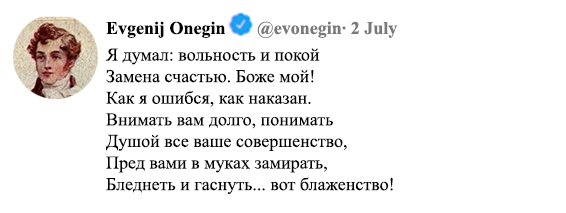
<style>
.page{position:relative;width:566px;height:213px;background:#ffffff}
.page>*{position:absolute;margin:0}
.t1{font:18px "TimesNewRomanPS-BoldMT";color:#7a7a7a}
.t2{font:18px "TimesNewRomanPS-BoldMT";color:#030303}
.t3{font:18px "TimesNewRomanPSMT";color:#030303}
</style>
<div class="page">
<p class="t1" style="left:106px;top:21px;width:292px;height:17px"><span class="t2">Evgenij Onegin       </span>@evonegin∙ 2 July</p>
<p class="t3" style="left:105px;top:48px;width:288px;height:146px">Я думал: вольность и покой<br>Замена счастью. Боже мой!<br>Как я ошибся, как наказан.<br>Внимать вам долго, понимать<br>Душой все ваше совершенство,<br>Пред вами в муках замирать,<br>Бледнеть и гаснуть... вот блаженство!</p>
</div>
